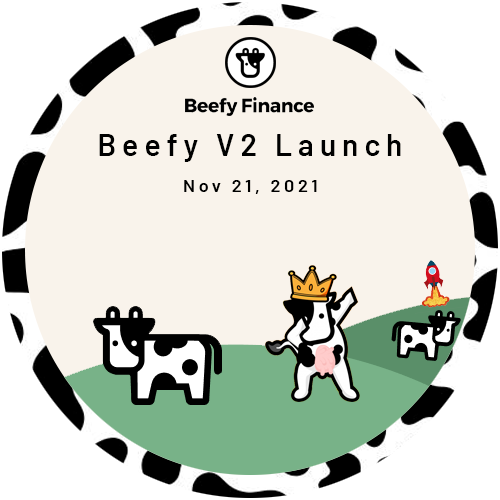
<style>
.page{position:relative;width:500px;height:500px;background:#f9f3eb}
.page>*{position:absolute;margin:0}
.t1{font:30px "Barlow-SemiBold";letter-spacing:0.2em;color:#000000}
.t2{font:18px "Barlow-SemiBold";letter-spacing:0.2em;color:#000000}
</style>
<div class="page">
<p class="t1" style="left:99px;top:134px;width:302px;height:28px">Beefy V2 Launch</p>
<p class="t2" style="left:184px;top:180px;width:133px;height:14px">Nov 21, 2021</p>
</div>
